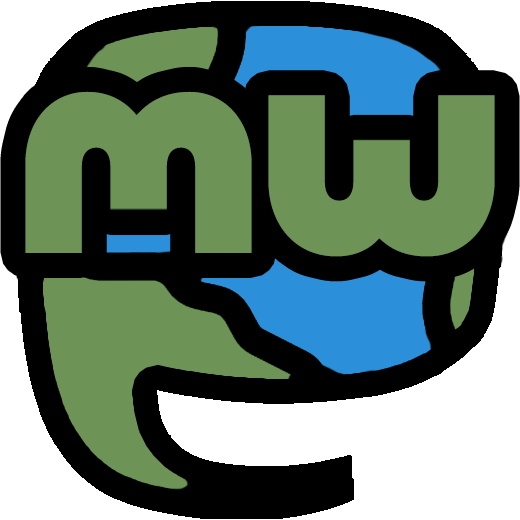
<style>
.page{position:relative;width:520px;height:520px;background:#000000}
.page>*{position:absolute;margin:0}
.t1{font:225.4px "EastmanAlternateTrial-Black";color:#6e9357}
</style>
<div class="page">
<p class="t1" style="left:25px;top:91px;width:470px;height:166px">MW</p>
</div>
